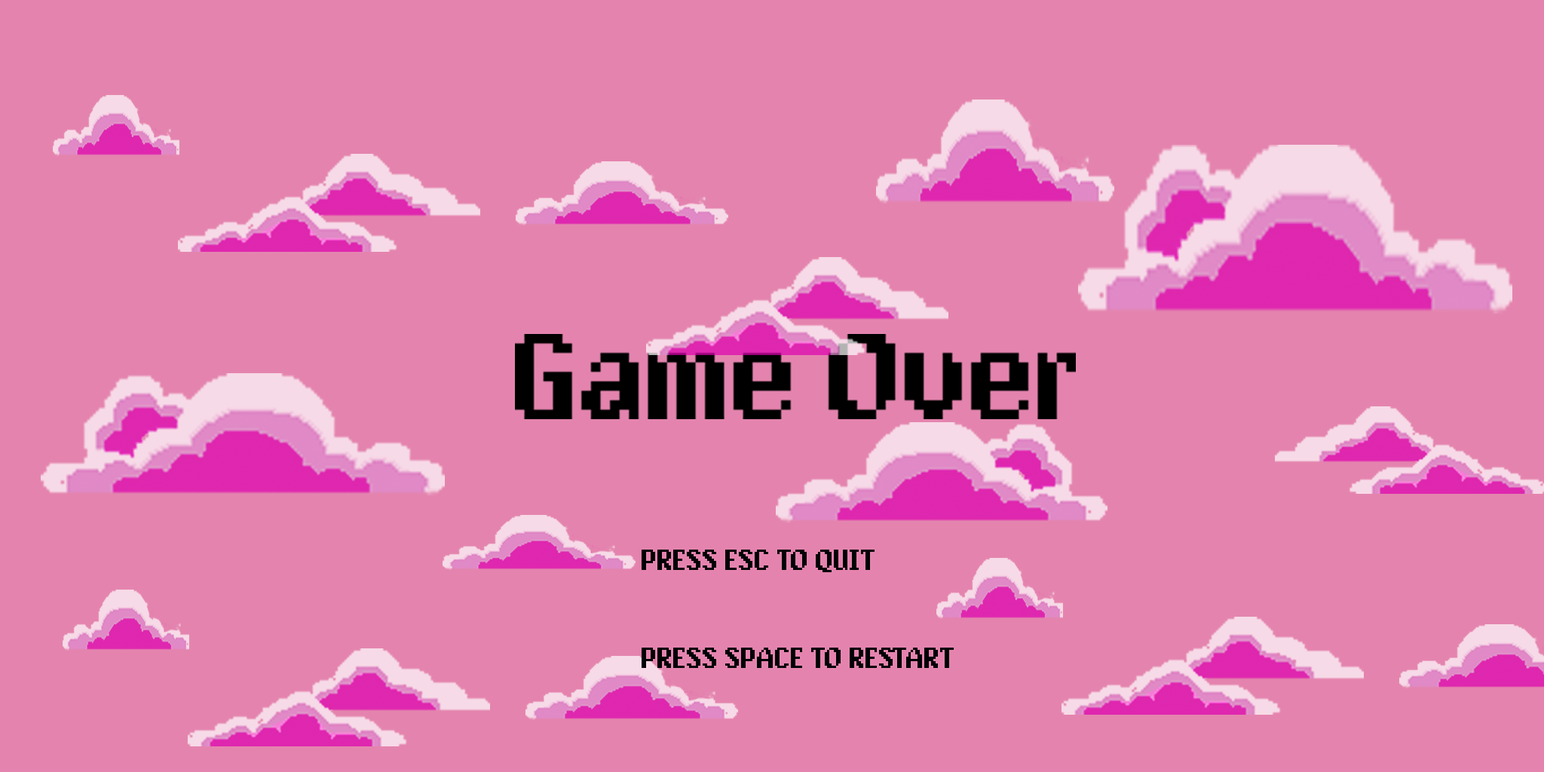
<style>
.page{position:relative;width:1544px;height:772px;background:#e484ae}
.page>*{position:absolute;margin:0}
.t1{font:27.1px "PixAntiqua";color:#000205}
</style>
<div class="page">
<p class="t1" style="left:642px;top:550px;width:312px;height:118px">PRESS ESC TO QUIT<br><br><br>PRESS SPACE TO RESTART</p>
</div>
